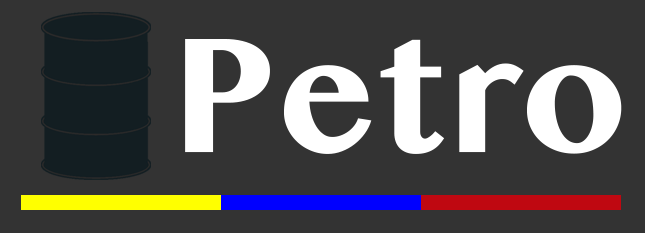
<style>
.page{position:relative;width:645px;height:233px;background:#333333}
.page>*{position:absolute;margin:0}
.t1{font:150px "BanglaMN-Bold";color:#ffffff}
</style>
<div class="page">
<p class="t1" style="left:185px;top:39px;width:437px;height:115px">Petro</p>
</div>
